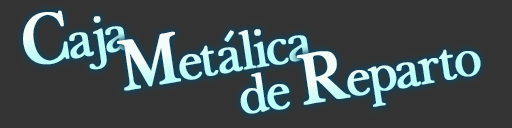
<style>
.page{position:relative;width:512px;height:128px;background:#333333}
.page>*{position:absolute;margin:0}
.t1{font:61px "BaskervilleLight";letter-spacing:-0.06em;font-weight:bold;scale:0.93 1}
.t2{font:84px "BaskervilleLight";letter-spacing:-0.06em;font-weight:bold;scale:0.93 1}
.t3{font:60px "BaskervilleLight";letter-spacing:-0.06em;color:#cbfcf8;font-weight:bold;scale:0.85 1}
.t4{font:61px "BaskervilleLight";letter-spacing:-0.06em;color:#cdfcf8;font-weight:bold;scale:0.93 1}
.t5{font:84px "BaskervilleLight";letter-spacing:-0.06em;color:#cdfcf8;font-weight:bold;scale:0.93 1}
.t6{font:61px "BaskervilleLight";letter-spacing:-0.06em;color:#bffcf8;font-weight:bold;scale:0.93 1}
</style>
<div class="page">
<p class="t1" style="left:23px;top:10px;width:107px;height:60px;rotate:-10deg"><span class="t2">C</span>aja</p>
<p class="t1" style="left:117px;top:29px;width:196px;height:62px;rotate:-10deg"><span class="t2">M</span>etalica</p>
<p class="t3" style="left:224px;top:30px;width:10px;height:12px;rotate:-56deg">-</p>
<p class="t4" style="left:296px;top:49px;width:185px;height:58px;rotate:-10deg"><span class="t5">R</span>eparto</p>
<p class="t6" style="left:240px;top:72px;width:50px;height:42px;rotate:-10deg">de</p>
</div>
